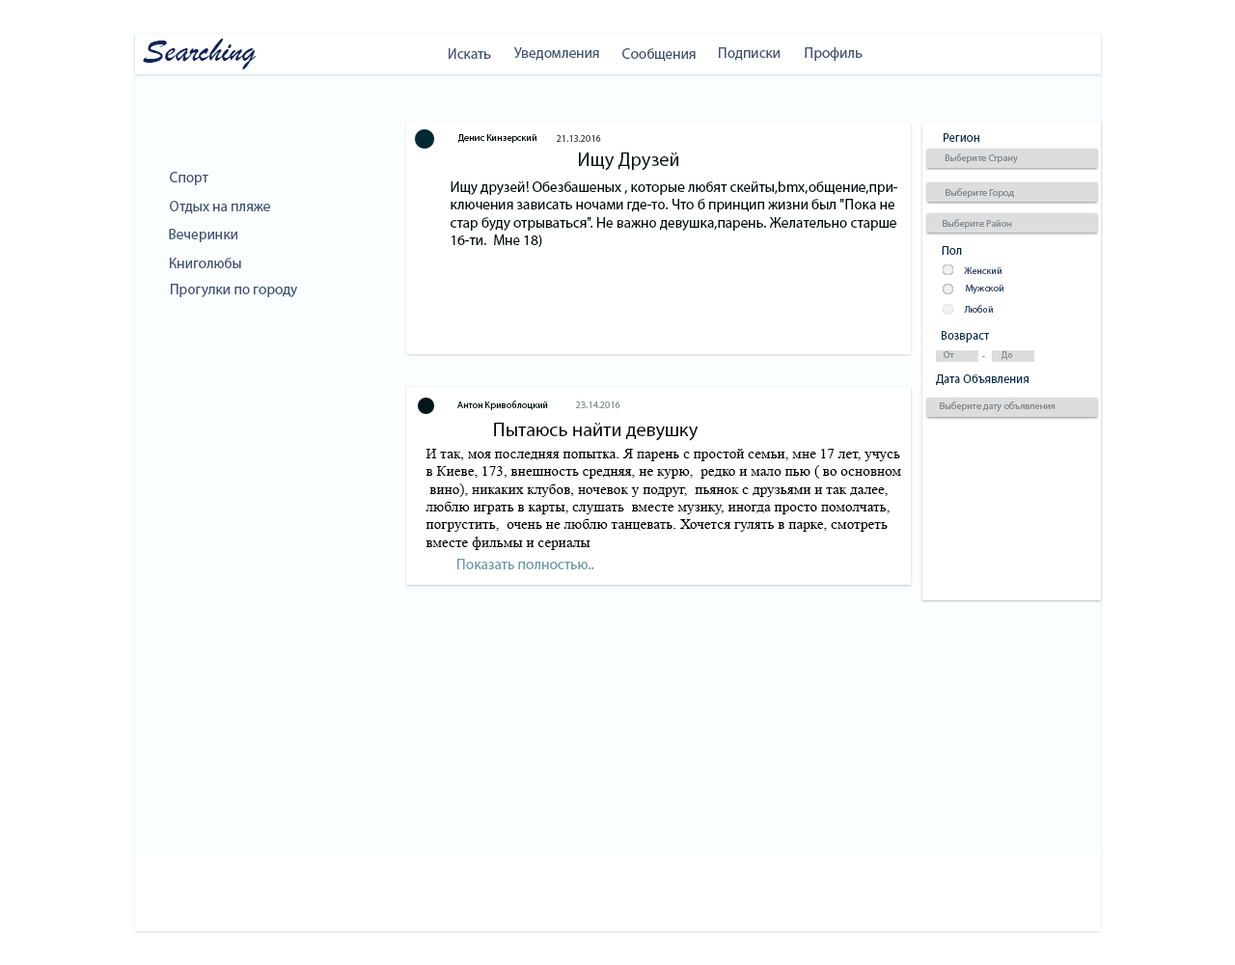
<style>
.page{position:relative;width:1235px;height:965px;background:#fbfeff}
.page>*{position:absolute;margin:0}
.t1{font:34.3px "BrushScriptMT";color:#10255c}
.t2{font:14.7px "MyriadPro-Regular";color:#425474}
.t3{font:9.8px "MyriadPro-Regular";color:#040b0d}
.t4{font:9.8px "MyriadPro-Regular";color:#4b4c4c}
.t5{font:12.3px "MyriadPro-Regular";color:#042c50}
.t6{font:19.6px "MyriadPro-Regular";color:#040b0d}
.t7{font:9.8px "MyriadPro-Regular";color:#868b8f}
.t8{font:14.7px "MyriadPro-Regular";color:#040b0d}
.t9{font:9.8px "MyriadPro-Regular";color:#384b6b}
.t10{font:9.8px "MyriadPro-Regular";color:#02161b}
.t11{font:9.8px "MyriadPro-Regular";color:#8c9496}
.t12{font:19.6px "MyriadPro-Regular";color:#000000}
.t13{font:14.7px "TimesNewRomanPSMT";color:#000000}
.t14{font:14.7px "MyriadPro-Regular";color:#6e9ba7}
</style>
<div class="page">
<p class="t1" style="left:143px;top:39px;width:114px;height:30px">Searching</p>
<p class="t2" style="left:449px;top:48px;width:42px;height:11px">Искать</p>
<p class="t2" style="left:513px;top:47px;width:86px;height:14px">Уведомления</p>
<p class="t2" style="left:623px;top:48px;width:73px;height:14px">Сообщения</p>
<p class="t2" style="left:719px;top:47px;width:61px;height:14px">Подписки</p>
<p class="t2" style="left:805px;top:47px;width:58px;height:14px">Профиль</p>
<p class="t3" style="left:458px;top:134px;width:79px;height:9px">Денис Кинзерский</p>
<p class="t4" style="left:556px;top:135px;width:45px;height:7px">21.13.2016</p>
<p class="t5" style="left:944px;top:133px;width:36px;height:9px">Регион</p>
<p class="t6" style="left:579px;top:152px;width:100px;height:19px">Ищу Друзей</p>
<p class="t7" style="left:945px;top:153px;width:73px;height:11px">Выберите Страну</p>
<p class="t2" style="left:170px;top:172px;width:38px;height:13px">Спорт</p>
<p class="t8" style="left:451px;top:181px;width:447px;height:66px">Ищу друзей! Обезбашеных , которые любят скейты,bmx,общение,при-<br>ключения зависать ночами где-то. Что б принцип жизни был "Пока не <br>стар буду отрываться". Не важно девушка,парень. Желательно старше <br>16-ти.  Мне 18)</p>
<p class="t7" style="left:946px;top:188px;width:68px;height:10px">Выберите Город</p>
<p class="t2" style="left:170px;top:201px;width:100px;height:13px">Отдых на пляже</p>
<p class="t7" style="left:943px;top:219px;width:69px;height:10px">Выберите Район</p>
<p class="t2" style="left:169px;top:229px;width:68px;height:13px">Вечеринки</p>
<p class="t2" style="left:170px;top:258px;width:71px;height:10px">Книголюбы</p>
<p class="t5" style="left:942px;top:246px;width:20px;height:9px">Пол</p>
<p class="t9" style="left:964px;top:267px;width:38px;height:7px">Женский</p>
<p class="t2" style="left:171px;top:284px;width:126px;height:13px">Прогулки по городу</p>
<p class="t9" style="left:966px;top:285px;width:38px;height:9px">Мужской</p>
<p class="t9" style="left:964px;top:305px;width:29px;height:8px">Любой</p>
<p class="t5" style="left:942px;top:331px;width:48px;height:12px">Возвраст</p>
<p class="t7" style="left:944px;top:351px;width:11px;height:7px">От</p>
<p class="t7" style="left:1002px;top:351px;width:11px;height:9px">До</p>
<p class="t7" style="left:983px;top:356px;width:2px;height:1px">-</p>
<p class="t5" style="left:936px;top:374px;width:93px;height:11px">Дата Объявления</p>
<p class="t10" style="left:457px;top:401px;width:91px;height:9px">Антон Кривоблоцкий</p>
<p class="t11" style="left:575px;top:402px;width:46px;height:6px">23.14.2016</p>
<p class="t7" style="left:940px;top:402px;width:116px;height:10px">Выберите дату объявления</p>
<p class="t12" style="left:494px;top:423px;width:205px;height:18px">Пытаюсь найти девушку</p>
<p class="t13" style="left:426px;top:449px;width:475px;height:101px">И так, моя последняя попытка. Я парень с простой семьи, мне 17 лет, учусь <br>в Киеве, 173, внешность средняя, не курю,  редко и мало пью ( во основном<br> вино), никаких клубов, ночевок у подруг,  пьянок с друзьями и так далее, <br>люблю играть в карты, слушать  вместе музику, иногда просто помолчать, <br>погрустить,  очень не люблю танцевать. Хочется гулять в парке, смотреть <br>вместе фильмы и сериалы</p>
<p class="t14" style="left:457px;top:559px;width:138px;height:10px">Показать полностью..</p>
</div>
